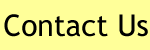
<style>
.page{position:relative;width:150px;height:50px;background:#ffff99}
.page>*{position:absolute;margin:0}
.t1{font:30px "TrebuchetMS";color:#000000}
</style>
<div class="page">
<p class="t1" style="left:4px;top:14px;width:144px;height:23px">Contact Us</p>
</div>
